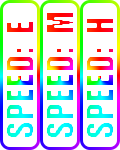
<style>
.page{position:relative;width:120px;height:150px;background:#ffffff}
.page>*{position:absolute;margin:0}
.t1{font:35px "Impact"}
</style>
<div class="page">
<p class="t1" style="left:46px;top:12px;width:28px;height:126px;rotate:-90deg">SPEED:  M</p>
<p class="t1" style="left:6px;top:21px;width:28px;height:117px;rotate:-90deg">SPEED:  E</p>
<p class="t1" style="left:86px;top:18px;width:28px;height:120px;rotate:-90deg">SPEED:  H</p>
</div>
